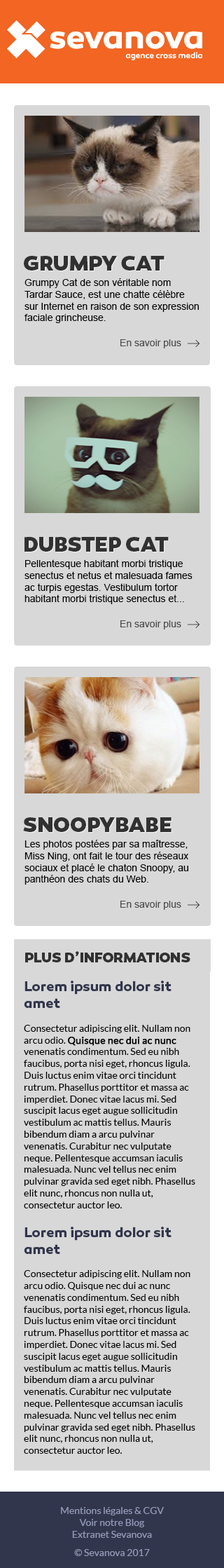
<style>
.page{position:relative;width:224px;height:1568px;background:#d8d8d8}
.page>*{position:absolute;margin:0}
.t1{font:21px "Canaro-ExtraBold";color:#313131;text-transform:uppercase}
.t2{font:9.8px "ArialMT";color:#000000}
.t3{font:9.8px "ArialMT";color:#4d4d4f}
.t4{font:14px "Canaro-ExtraBold";color:#313131;text-transform:uppercase}
.t5{font:9.8px "Lato-Regular";color:#000000}
.t6{font:14px "Canaro-Bold";color:#31364c}
.t7{font:9.8px "Lato-Regular";color:#000000;font-weight:bold}
.t8{font:9.8px "Lato-Regular";color:#9198b8}
</style>
<div class="page">
<p class="t1" style="left:24px;top:256px;width:141px;height:15px">Grumpy cat</p>
<p class="t2" style="left:25px;top:278px;width:174px;height:45px">Grumpy Cat de son véritable nom<br>Tardar Sauce, est une chatte célèbre<br>sur Internet en raison de son expression faciale grincheuse.</p>
<p class="t3" style="left:121px;top:339px;width:61px;height:9px">En savoir plus</p>
<p class="t1" style="left:25px;top:537px;width:144px;height:15px">Dubstep cat</p>
<p class="t2" style="left:25px;top:559px;width:168px;height:45px">Pellentesque habitant morbi tristique senectus et netus et malesuada fames<br>ac turpis egestas. Vestibulum tortor habitant morbi tristique senectus et...</p>
<p class="t3" style="left:121px;top:620px;width:61px;height:9px">En savoir plus</p>
<p class="t1" style="left:23px;top:817px;width:149px;height:15px">Snoopybabe</p>
<p class="t2" style="left:25px;top:840px;width:164px;height:45px">Les photos postées par sa maîtresse,<br>Miss Ning, ont fait le tour des réseaux sociaux et placé le chaton Snoopy, au panthéon des chats du Web.</p>
<p class="t3" style="left:121px;top:901px;width:61px;height:9px">En savoir plus</p>
<p class="t4" style="left:25px;top:951px;width:166px;height:11px">Plus d’informations</p>
<p class="t5" style="left:24px;top:981px;width:172px;height:473px"><span class="t6">Lorem ipsum dolor sit amet<br></span><br>Consectetur adipiscing elit. Nullam non arcu odio. <span class="t7">Quisque nec dui ac nunc</span> venenatis condimentum. Sed eu nibh faucibus, porta nisi eget, rhoncus ligula. Duis luctus enim vitae orci tincidunt rutrum. Phasellus porttitor et massa ac imperdiet. Donec vitae lacus mi. Sed suscipit lacus eget augue sollicitudin vestibulum ac mattis tellus. Mauris bibendum diam a arcu pulvinar venenatis. Curabitur nec vulputate neque. Pellentesque accumsan iaculis malesuada. Nunc vel tellus nec enim pulvinar gravida sed eget nibh. Phasellus elit nunc, rhoncus non nulla ut, consectetur auctor leo.<br><br><span class="t6">Lorem ipsum dolor sit amet<br></span><br>Consectetur adipiscing elit. Nullam non arcu odio. Quisque nec dui ac nunc venenatis condimentum. Sed eu nibh faucibus, porta nisi eget, rhoncus ligula. Duis luctus enim vitae orci tincidunt rutrum. Phasellus porttitor et massa ac imperdiet. Donec vitae lacus mi. Sed suscipit lacus eget augue sollicitudin vestibulum ac mattis tellus. Mauris bibendum diam a arcu pulvinar venenatis. Curabitur nec vulputate neque. Pellentesque accumsan iaculis malesuada. Nunc vel tellus nec enim pulvinar gravida sed eget nibh. Phasellus elit nunc, rhoncus non nulla ut, consectetur auctor leo.</p>
<p class="t8" style="left:61px;top:1507px;width:103px;height:49px;text-align:center">Mentions légales &amp; CGV <br>Voir notre Blog<br>Extranet Sevanova<br>© Sevanova 2017</p>
</div>
